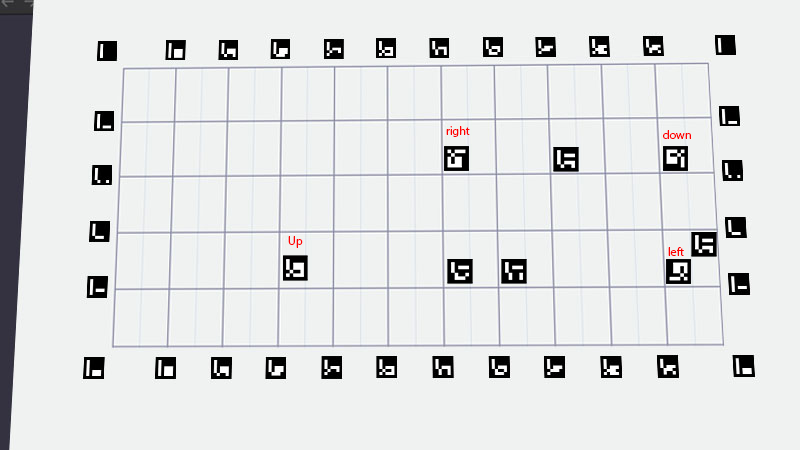
<style>
.page{position:relative;width:800px;height:450px;background:#f0f2f1}
.page>*{position:absolute;margin:0}
.t1{font:12px "MyriadPro-Regular";color:#ff0101}
</style>
<div class="page">
<p class="t1" style="left:446px;top:126px;width:24px;height:11px">right</p>
<p class="t1" style="left:663px;top:130px;width:28px;height:9px">down</p>
<p class="t1" style="left:288px;top:236px;width:15px;height:12px">Up</p>
<p class="t1" style="left:668px;top:247px;width:16px;height:9px">left</p>
</div>
